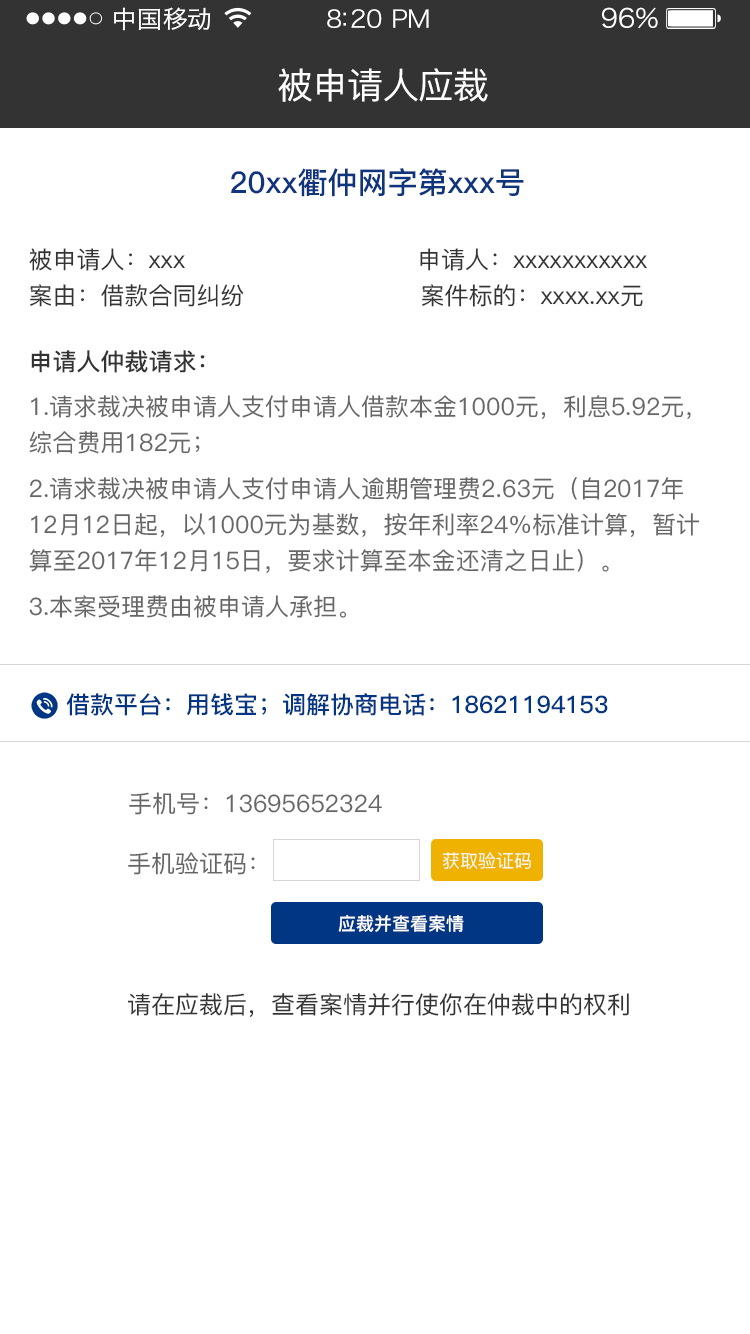
<style>
.page{position:relative;width:750px;height:1334px;background:#ffffff}
.page>*{position:absolute;margin:0}
.t1{font:24px "HiraginoSansGB-W3";letter-spacing:0.02em;color:#ffffff;scale:1.03 1}
.t2{font:24px "HiraginoSansGB-W3";letter-spacing:-0.02em;color:#ffffff;scale:1.03 1}
.t3{font:26.2px "HiraginoSansGB-W3";letter-spacing:-0.02em;color:#ffffff;scale:1.03 1}
.t4{font:36px "PingFang-SC-Medium";letter-spacing:-0.02em;color:#ffffff}
.t5{font:30px "PingFang-SC-Bold";color:#0f357f}
.t6{font:24px/36px "PingFang-SC-Medium";color:#333333}
.t7{font:24px "PingFang-SC-Bold";color:#333333}
.t8{font:24px/36px "PingFang-SC-Medium";color:#666666}
.t9{font:24px "PingFang-SC-Medium";color:#666666}
.t10{font:24px "PingFang-SC-Bold";color:#003684}
.t11{font:18px "PingFang-SC-Regular";color:#ffffff}
.t12{font:18px "PingFang-SC-Bold";color:#ffffff}
.t13{font:24px "PingFang-SC-Medium";color:#333333}
</style>
<div class="page">
<p class="t1" style="left:114px;top:7px;width:97px;height:24px">中国移动</p>
<p class="t2" style="left:327px;top:9px;width:102px;height:19px">8:20 PM</p>
<p class="t3" style="left:602px;top:7px;width:56px;height:22px">96%</p>
<p class="t4" style="left:278px;top:68px;width:210px;height:34px">被申请人应裁</p>
<p class="t5" style="left:231px;top:168px;width:293px;height:29px">20xx衢仲网字第xxx号</p>
<p class="t6" style="left:29px;top:248px;width:618px;height:59px">被申请人：xxx                             申请人：xxxxxxxxxxx<br>案由：借款合同纠纷                      案件标的：xxxx.xx元</p>
<p class="t7" style="left:31px;top:350px;width:174px;height:23px">申请人仲裁请求：</p>
<p class="t8" style="left:29px;top:395px;width:662px;height:59px">1.请求裁决被申请人支付申请人借款本金1000元，利息5.92元，<br>综合费用182元；</p>
<p class="t8" style="left:29px;top:477px;width:671px;height:96px">2.请求裁决被申请人支付申请人逾期管理费2.63元（自2017年<br>12月12日起，以1000元为基数，按年利率24%标准计算，暂计<br>算至2017年12月15日，要求计算至本金还清之日止）。</p>
<p class="t9" style="left:29px;top:595px;width:318px;height:23px">3.本案受理费由被申请人承担。</p>
<p class="t10" style="left:66px;top:693px;width:542px;height:23px">借款平台：用钱宝；调解协商电话：18621194153</p>
<p class="t9" style="left:129px;top:792px;width:253px;height:23px">手机号：13695652324</p>
<p class="t9" style="left:128px;top:852px;width:127px;height:23px">手机验证码：</p>
<p class="t11" style="left:442px;top:852px;width:89px;height:17px">获取验证码</p>
<p class="t12" style="left:338px;top:915px;width:126px;height:17px">应裁并查看案情</p>
<p class="t13" style="left:127px;top:993px;width:502px;height:24px">请在应裁后，查看案情并行使你在仲裁中的权利</p>
</div>
